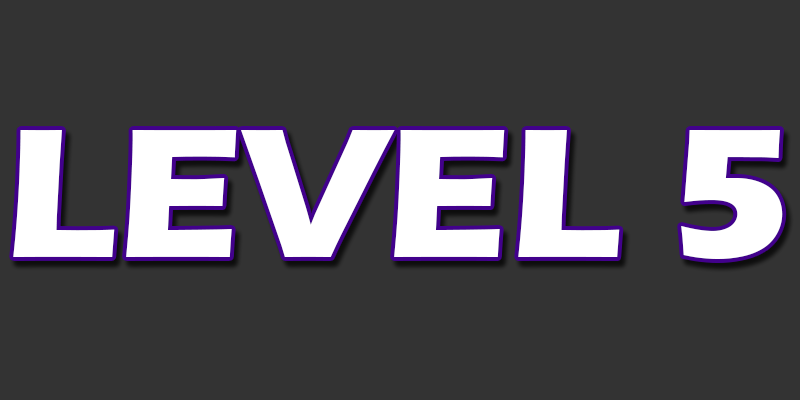
<style>
.page{position:relative;width:800px;height:400px;background:#333333}
.page>*{position:absolute;margin:0}
.t1{font:190px "ErasITC-Bold";color:#ffffff}
</style>
<div class="page">
<p class="t1" style="left:13px;top:130px;width:770px;height:129px">LEVEL 5</p>
</div>
